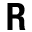
<style>
.page{position:relative;width:32px;height:32px;background:#ffffff}
.page>*{position:absolute;margin:0}
.t1{font:36px "HelveticaLTStd-BoldCond";color:#000000}
</style>
<div class="page">
<p class="t1" style="left:7px;top:3px;width:19px;height:27px">R</p>
</div>
